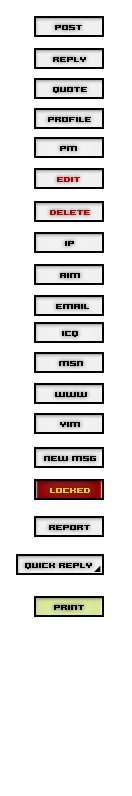
<style>
.page{position:relative;width:132px;height:796px;background:#ffffff}
.page>*{position:absolute;margin:0}
.t1{font:8px "Hooge0563";color:#000000}
.t2{font:8px "Hooge0563";color:#af0000}
.t3{font:8px "Hooge0563";color:#b30000}
.t4{font:8px "Hooge0563";color:#ffcc00}
</style>
<div class="page">
<p class="t1" style="left:55px;top:25px;width:27px;height:5px">POST</p>
<p class="t1" style="left:53px;top:57px;width:33px;height:5px">REPLY</p>
<p class="t1" style="left:53px;top:87px;width:34px;height:6px">QUOTE</p>
<p class="t1" style="left:48px;top:117px;width:43px;height:5px">PROFILE</p>
<p class="t1" style="left:60px;top:146px;width:17px;height:5px">PM</p>
<p class="t2" style="left:57px;top:177px;width:23px;height:5px">EDIT</p>
<p class="t3" style="left:50px;top:210px;width:40px;height:5px">DELETE</p>
<p class="t1" style="left:65px;top:241px;width:9px;height:5px">IP</p>
<p class="t1" style="left:60px;top:273px;width:20px;height:5px">AIM</p>
<p class="t1" style="left:56px;top:304px;width:33px;height:5px">EMAIL</p>
<p class="t1" style="left:62px;top:331px;width:16px;height:6px">ICQ</p>
<p class="t1" style="left:59px;top:361px;width:24px;height:5px">MSN</p>
<p class="t1" style="left:55px;top:392px;width:32px;height:5px">WWW</p>
<p class="t1" style="left:60px;top:422px;width:20px;height:5px">YIM</p>
<p class="t1" style="left:44px;top:456px;width:52px;height:5px">NEW MSG</p>
<p class="t4" style="left:50px;top:488px;width:40px;height:5px">LOCKED</p>
<p class="t1" style="left:49px;top:525px;width:41px;height:5px">REPORT</p>
<p class="t1" style="left:25px;top:563px;width:67px;height:6px">QUICK REPLY</p>
<p class="t1" style="left:54px;top:605px;width:30px;height:5px">PRINT</p>
</div>
